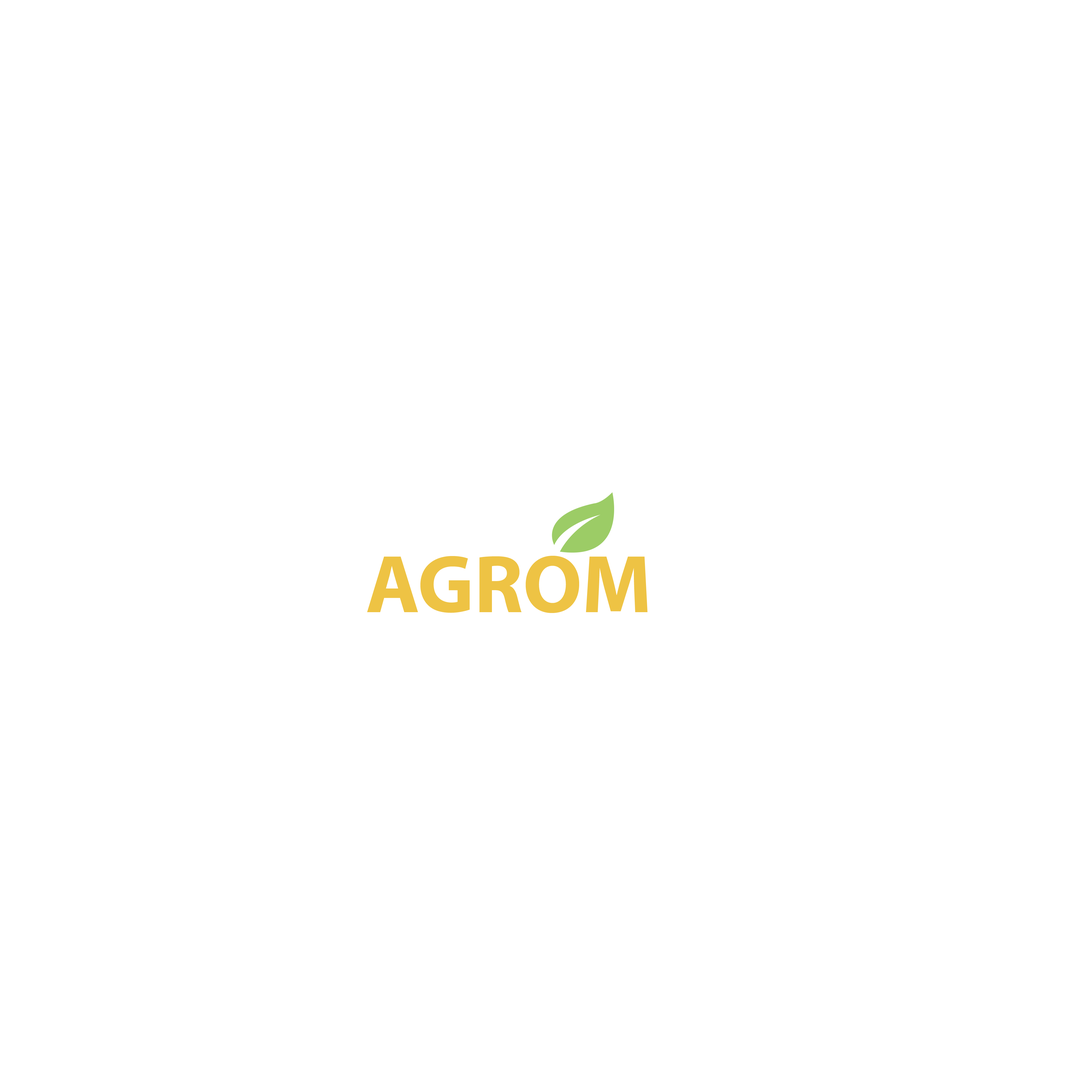
<style>
.page{position:relative;width:1092px;height:1092px;background:#ffffff}
.page>*{position:absolute;margin:0}
.t1{font:82.5px "MyriadPro-Bold";color:#eec344}
</style>
<div class="page">
<p class="t1" style="left:367px;top:556px;width:281px;height:57px">AGROM</p>
</div>
